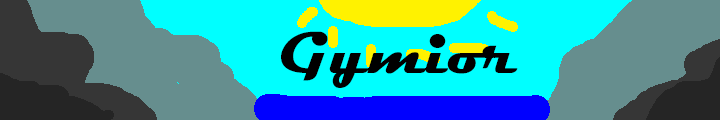
<style>
.page{position:relative;width:720px;height:120px;background:#00ffff}
.page>*{position:absolute;margin:0}
.t1{font:60px "Magneto-Bold";color:#000000}
</style>
<div class="page">
<p class="t1" style="left:281px;top:31px;width:237px;height:57px">Gymior</p>
</div>
